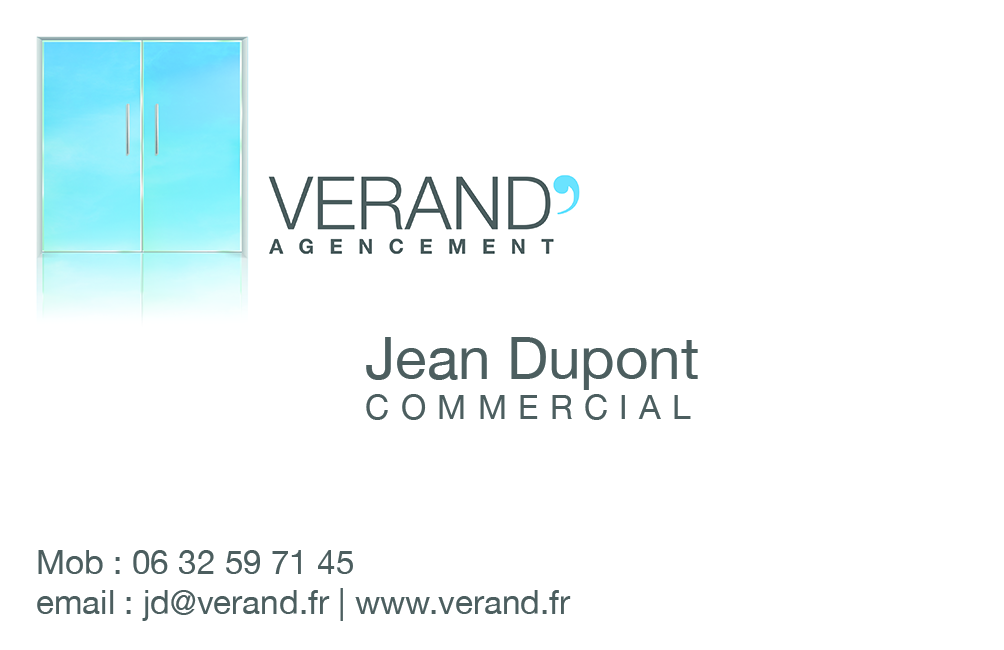
<style>
.page{position:relative;width:1004px;height:650px;background:#ffffff}
.page>*{position:absolute;margin:0}
.t1{font:58.3px "HelveticaNeue";color:#4c5e5f}
.t2{font:33.3px "HelveticaNeue";letter-spacing:0.34em;color:#4c5e5f;text-transform:uppercase}
.t3{font:33.3px "HelveticaNeue";color:#4c5e5f}
</style>
<div class="page">
<p class="t1" style="left:366px;top:337px;width:332px;height:83px">Jean Dupont<br><span class="t2">Commercial</span></p>
<p class="t3" style="left:37px;top:550px;width:534px;height:71px">Mob : 06 32 59 71 45<br>email : jd@verand.fr | www.verand.fr</p>
</div>
